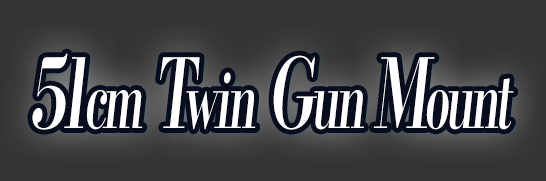
<style>
.page{position:relative;width:546px;height:181px;background:#333333}
.page>*{position:absolute;margin:0}
.t1{font:76.8px "KochoStd-Heavy";letter-spacing:-0.08em;color:#ffffff;font-style:italic;scale:0.61 1}
.t2{font:96px "KochoStd-Heavy";letter-spacing:-0.08em;color:#ffffff;font-style:italic;scale:0.61 1}
</style>
<div class="page">
<p class="t1" style="left:32px;top:53px;width:482px;height:77px"><span class="t2">51</span>cm<span class="t2"> T</span>win<span class="t2"> G</span>un <span class="t2">M</span>ount</p>
</div>
